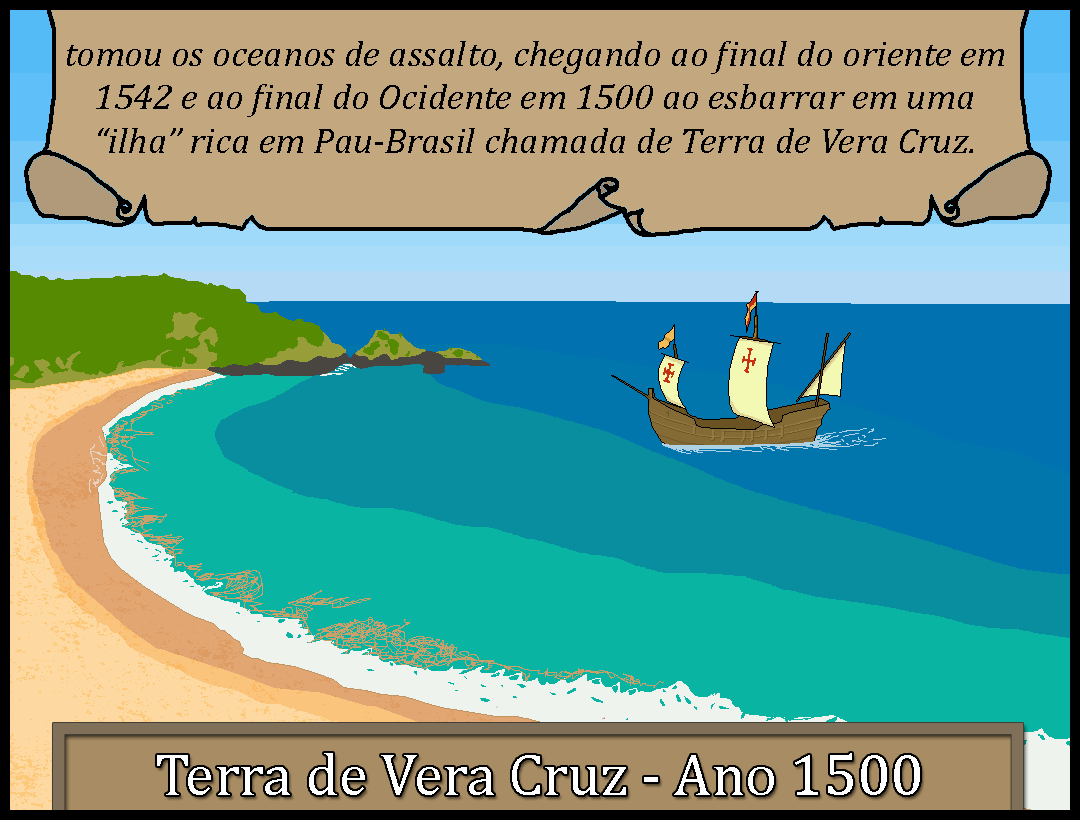
<style>
.page{position:relative;width:1080px;height:820px;background:#c3a77f}
.page>*{position:absolute;margin:0}
.t1{font:36px "Cambria-Italic";color:#000000;scale:1.03 1}
.t2{font:60px "Cambria";color:#ffffff}
</style>
<div class="page">
<p class="t1" style="left:67px;top:41px;width:937px;height:112px;text-align:center">tomou os oceanos de assalto, chegando ao final do oriente em 1542 e ao final do Ocidente em 1500 ao esbarrar em uma “ilha” rica em Pau-Brasil chamada de Terra de Vera Cruz.</p>
<p class="t2" style="left:157px;top:753px;width:763px;height:42px">Terra de Vera Cruz - Ano 1500</p>
</div>
